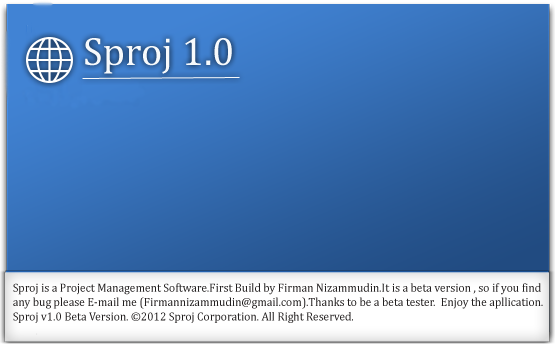
<style>
.page{position:relative;width:555px;height:346px}
.page>*{position:absolute;margin:0}
.t1{font:40px "Cambria";color:#f7fafc}
.t2{font:12px "Cambria";color:#221f1f;scale:0.96 1}
</style>
<div class="page">
<p class="t1" style="left:85px;top:38px;width:147px;height:36px">Sproj 1.0</p>
<p class="t2" style="left:13px;top:283px;width:530px;height:40px">Sproj is a Project Management Software.First Build by Firman Nizammudin.It is a beta version , so if you find<br>any bug please E-mail me (Firmannizammudin@gmail.com).Thanks to be a beta tester.  Enjoy the apllication.<br>Sproj v1.0 Beta Version. ©2012 Sproj Corporation. All Right Reserved.</p>
</div>
